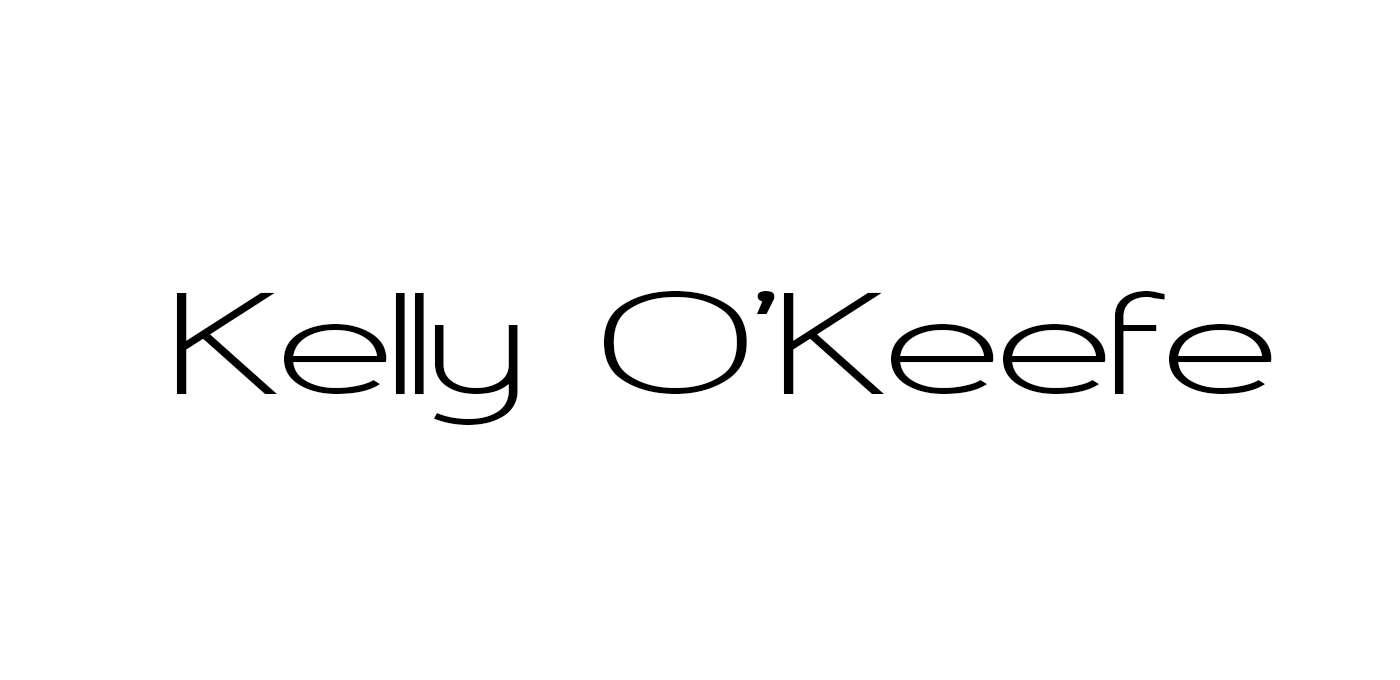
<style>
.page{position:relative;width:1400px;height:680px;background:#ffffff}
.page>*{position:absolute;margin:0}
.t1{font:172px "AsenineWide";color:#000000}
</style>
<div class="page">
<p class="t1" style="left:176px;top:291px;width:1096px;height:134px">Kelly O’Keefe</p>
</div>
